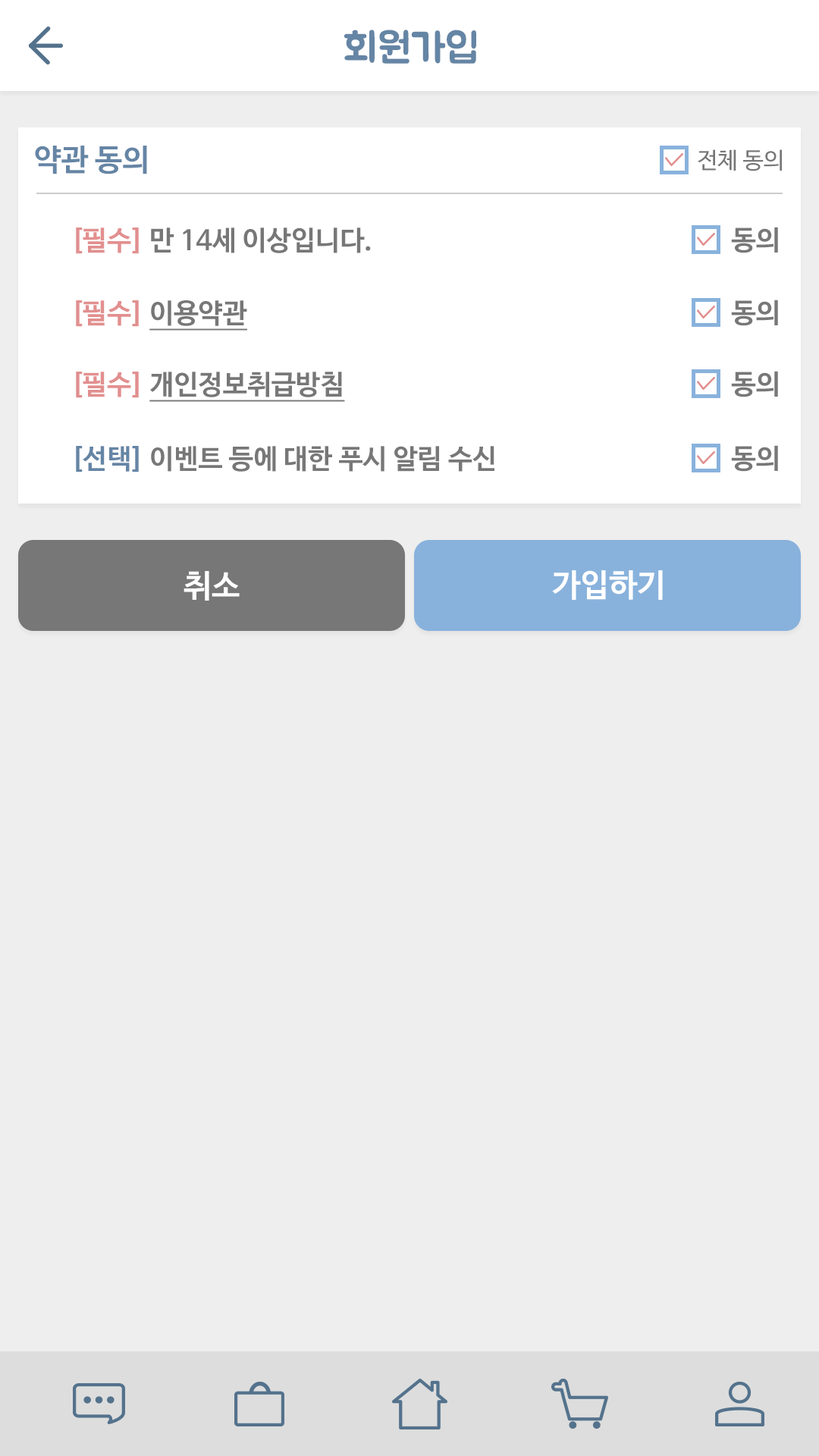
<style>
.page{position:relative;width:819px;height:1456px;background:#eeeeee}
.page>*{position:absolute;margin:0}
.t1{font:40.9px "BMJUA";color:#6585a5}
.t2{font:30.3px "NanumBarunGothicBold";color:#6585a5}
.t3{font:22.7px "NanumBarunGothic";color:#777777}
.t4{font:27.3px "NanumBarunGothicBold";color:#777777}
.t5{font:27.3px "NanumBarunGothicBold";color:#e28f8f}
.t6{font:27.3px "NanumBarunGothicBold";color:#777777;text-decoration:underline}
.t7{font:27.3px "NanumBarunGothicBold";color:#6585a5}
.t8{font:31.8px "NanumBarunGothicBold";color:#ffffff}
</style>
<div class="page">
<p class="t1" style="left:344px;top:30px;width:132px;height:34px">회원가입</p>
<p class="t2" style="left:35px;top:146px;width:112px;height:28px">약관 동의</p>
<p class="t3" style="left:698px;top:149px;width:84px;height:22px">전체 동의</p>
<p class="t4" style="left:76px;top:227px;width:295px;height:27px"><span class="t5">[필수]</span> 만 14세 이상입니다.</p>
<p class="t4" style="left:731px;top:227px;width:47px;height:26px">동의</p>
<p class="t5" style="left:76px;top:300px;width:171px;height:31px">[필수] <span class="t6">이용약관</span></p>
<p class="t4" style="left:731px;top:300px;width:47px;height:26px">동의</p>
<p class="t6" style="left:76px;top:372px;width:269px;height:30px"><span class="t5">[필수] </span>개인정보취급방침</p>
<p class="t4" style="left:731px;top:371px;width:47px;height:26px">동의</p>
<p class="t4" style="left:76px;top:446px;width:418px;height:26px"><span class="t7">[선택]</span> 이벤트 등에 대한 푸시 알림 수신</p>
<p class="t4" style="left:731px;top:445px;width:47px;height:27px">동의</p>
<p class="t8" style="left:184px;top:571px;width:56px;height:30px">취소</p>
<p class="t8" style="left:552px;top:570px;width:111px;height:30px">가입하기</p>
</div>
